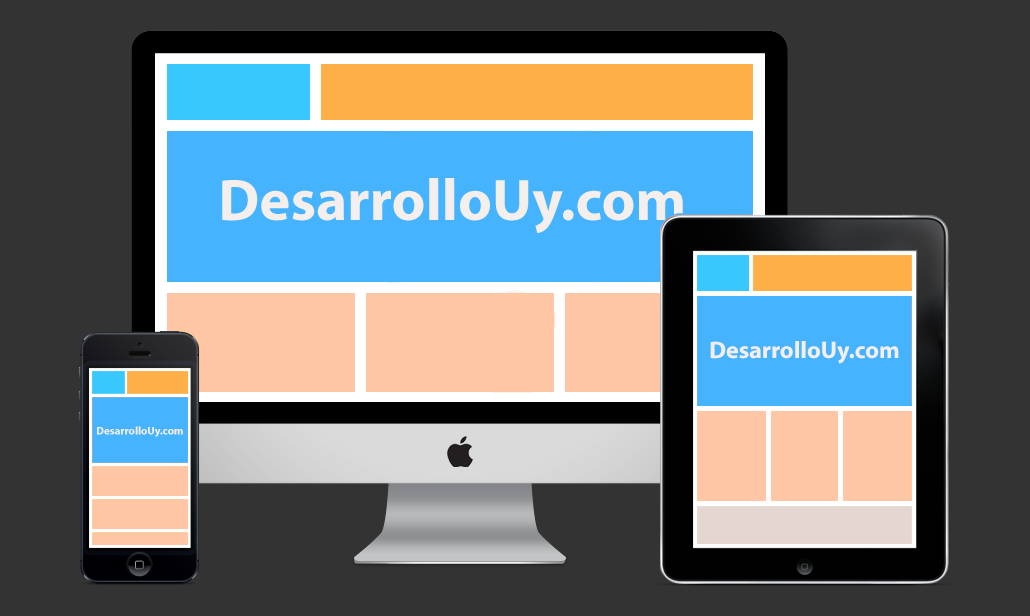
<style>
.page{position:relative;width:1030px;height:616px;background:#333333}
.page>*{position:absolute;margin:0}
.t1{font:24px "MyriadPro-Bold";color:#f4efec}
.t2{font:11px "MyriadPro-Bold";color:#f4efec}
</style>
<div class="page">
<p class="t1" style="left:710px;top:341px;width:189px;height:23px">DesarrolloUy.com</p>
<p class="t2" style="left:97px;top:426px;width:86px;height:11px">DesarrolloUy.com</p>
</div>
